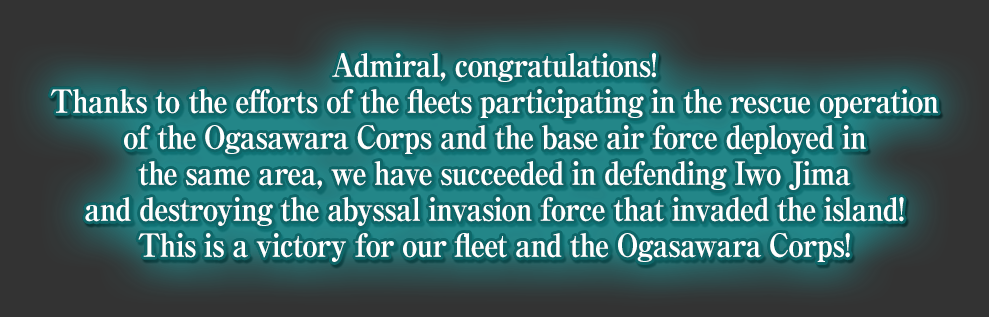
<style>
.page{position:relative;width:989px;height:317px;background:#333333}
.page>*{position:absolute;margin:0}
.t1{font:32px/36px "RyuminPro-ExBold";letter-spacing:-0.04em;color:#ffffff;scale:0.9 1}
</style>
<div class="page">
<p class="t1" style="left:50px;top:53px;width:888px;height:209px;text-align:center">Admiral, congratulations!<br>Thanks to the efforts of the fleets participating in the rescue operation<br>of the Ogasawara Corps and the base air force deployed in<br>the same area, we have succeeded in defending Iwo Jima<br>and destroying the abyssal invasion force that invaded the island!<br>This is a victory for our fleet and the Ogasawara Corps!</p>
</div>
